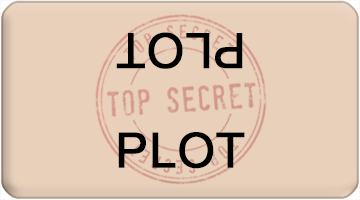
<style>
.page{position:relative;width:360px;height:200px;background:#e8d0bb}
.page>*{position:absolute;margin:0}
.t1{font:48px "ArialMT";color:#000000;font-weight:bold}
</style>
<div class="page">
<p class="t1" style="left:116px;top:32px;width:127px;height:37px;rotate:180deg">PLOT</p>
<p class="t1" style="left:118px;top:132px;width:127px;height:37px">PLOT</p>
</div>
